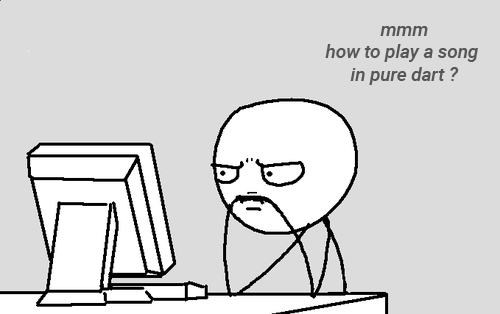
<style>
.page{position:relative;width:500px;height:314px;background:#dcdcdc}
.page>*{position:absolute;margin:0}
.t1{font:18.7px "Roboto-MediumItalic";color:#565656}
</style>
<div class="page">
<p class="t1" style="left:325px;top:26px;width:153px;height:59px;text-align:center">mmm<br>how to play a song <br>in pure dart ?</p>
</div>
